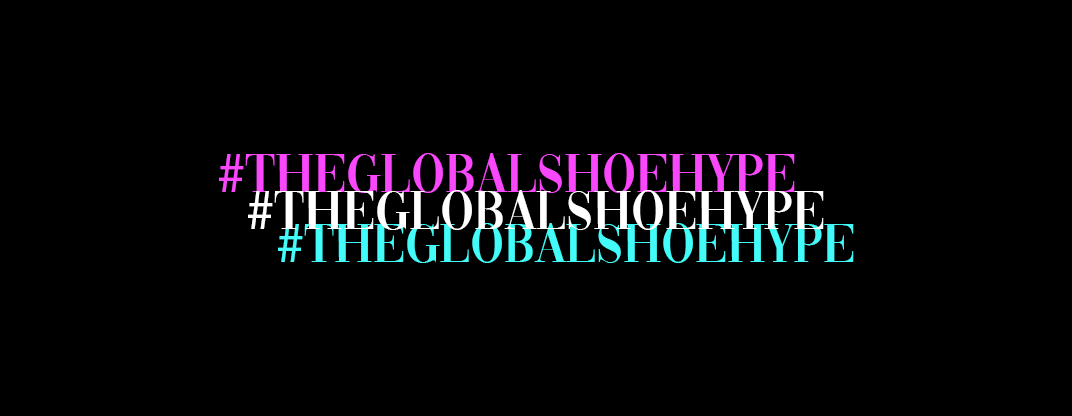
<style>
.page{position:relative;width:1072px;height:416px;background:#000000}
.page>*{position:absolute;margin:0}
.t1{font:57px "Vogue-Regular";color:#f948fb}
.t2{font:57px "MyriadPro-Regular";color:#f948fb}
.t3{font:57px "Vogue-Regular";color:#ffffff}
.t4{font:57px "MyriadPro-Regular";color:#ffffff}
.t5{font:57px "Vogue-Regular";color:#43fbf8}
.t6{font:57px "MyriadPro-Regular";color:#43fbf8}
</style>
<div class="page">
<p class="t1" style="left:219px;top:153px;width:576px;height:40px"><span class="t2">#</span>THEGLOBALSHOEHYPE</p>
<p class="t3" style="left:248px;top:190px;width:576px;height:40px"><span class="t4">#</span>THEGLOBALSHOEHYPE</p>
<p class="t5" style="left:278px;top:223px;width:576px;height:40px"><span class="t6">#</span>THEGLOBALSHOEHYPE</p>
</div>
